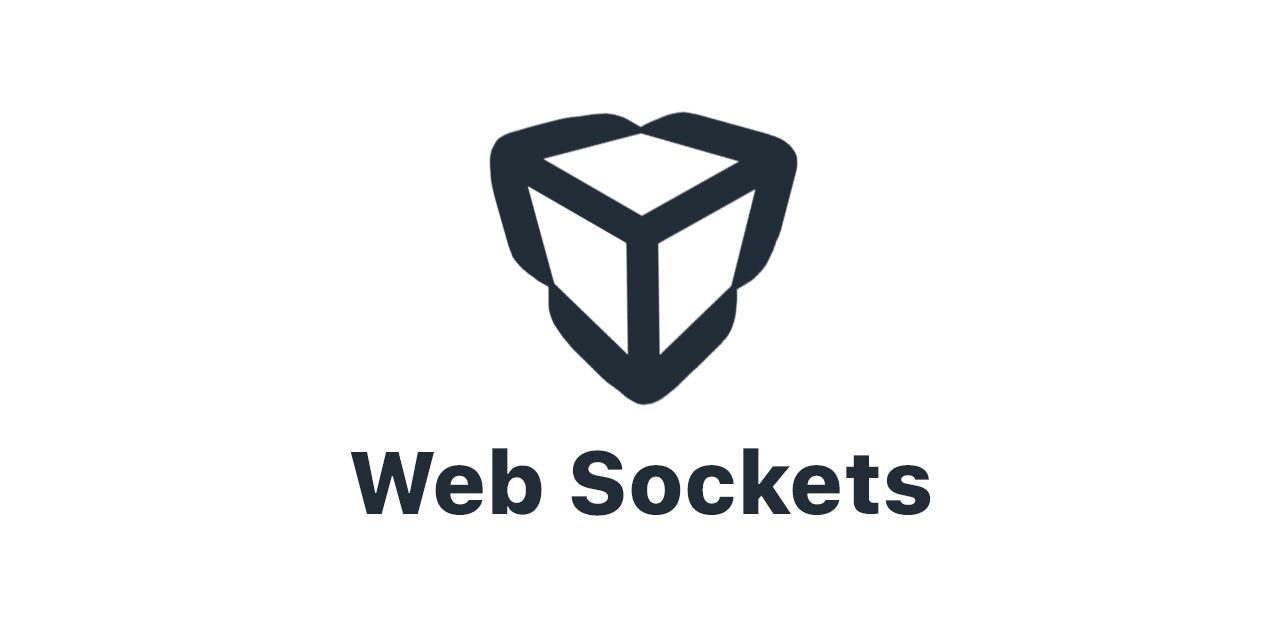
<style>
.page{position:relative;width:1280px;height:640px;background:#ffffff}
.page>*{position:absolute;margin:0}
.t1{font:88px "SFProText-Heavy";color:#222c36}
</style>
<div class="page">
<p class="t1" style="left:350px;top:448px;width:581px;height:68px">Web Sockets</p>
</div>
